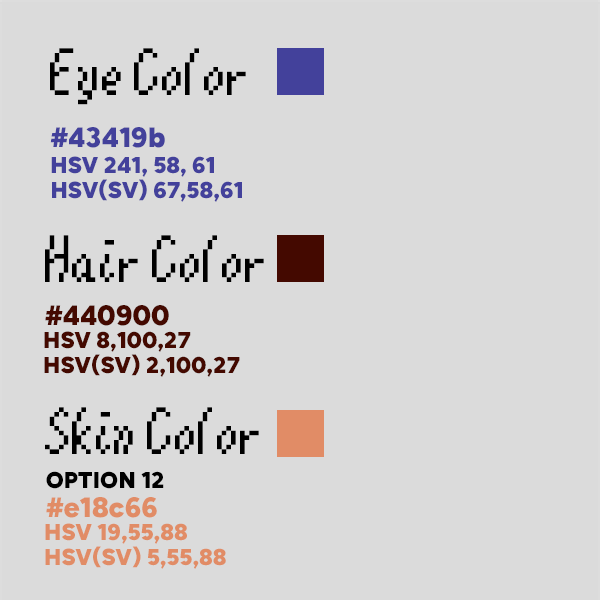
<style>
.page{position:relative;width:600px;height:600px;background:#dbdbdb}
.page>*{position:absolute;margin:0}
.t1{font:56px "Mario64";color:#000000}
.t2{font:28px "BlueberrySans-Black";color:#43419b}
.t3{font:23px "BlueberrySans-Black";color:#43419b}
.t4{font:28px "BlueberrySans-Black";color:#440900}
.t5{font:23px "BlueberrySans-Black";color:#440900}
.t6{font:23px "BlueberrySans-Black";color:#000000;text-transform:uppercase}
.t7{font:28px "BlueberrySans-Black";color:#e18c66}
.t8{font:23px "BlueberrySans-Black";color:#e18c66}
</style>
<div class="page">
<p class="t1" style="left:50px;top:48px;width:196px;height:57px">Eye Color</p>
<p class="t2" style="left:50px;top:127px;width:115px;height:21px">#43419b</p>
<p class="t3" style="left:51px;top:156px;width:163px;height:21px">HSV 241, 58, 61</p>
<p class="t3" style="left:52px;top:179px;width:190px;height:23px">HSV(SV) 67,58,61</p>
<p class="t1" style="left:45px;top:235px;width:219px;height:47px">Hair Color</p>
<p class="t4" style="left:45px;top:305px;width:124px;height:21px">#440900</p>
<p class="t5" style="left:44px;top:331px;width:147px;height:21px">HSV 8,100,27</p>
<p class="t5" style="left:44px;top:354px;width:196px;height:23px">HSV(SV) 2,100,27</p>
<p class="t1" style="left:45px;top:407px;width:214px;height:47px">Skin Color</p>
<p class="t6" style="left:46px;top:471px;width:118px;height:18px">Option 12</p>
<p class="t7" style="left:46px;top:497px;width:111px;height:21px">#e18c66</p>
<p class="t8" style="left:45px;top:523px;width:142px;height:21px">HSV 19,55,88</p>
<p class="t8" style="left:45px;top:546px;width:181px;height:23px">HSV(SV) 5,55,88</p>
</div>
